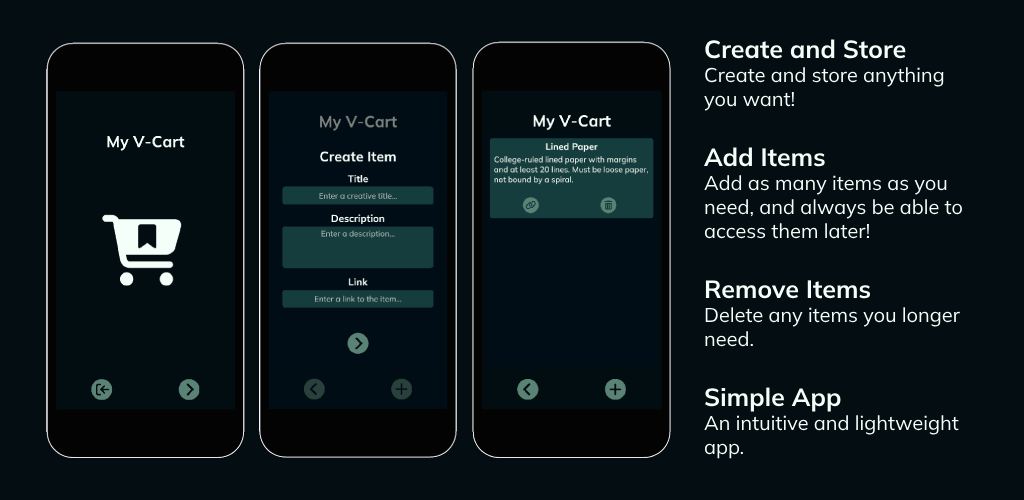
<style>
.page{position:relative;width:1024px;height:500px;background:#040d12}
.page>*{position:absolute;margin:0}
.t1{font:20px "Mulish-Regular";color:#f5fffa}
.t2{font:25px "Mulish-Bold";color:#f5fffa}
</style>
<div class="page">
<p class="t1" style="left:704px;top:39px;width:258px;height:420px"><span class="t2">Create and Store<br></span>Create and store anything<br>you want!<br><br><span class="t2">Add Items<br></span>Add as many items as you<br>need, and always be able to<br>access them later!<br><br><span class="t2">Remove Items<br></span>Delete any items you longer<br>need.<br><br><span class="t2">Simple App<br></span>An intuitive and lightweight<br>app.</p>
</div>
